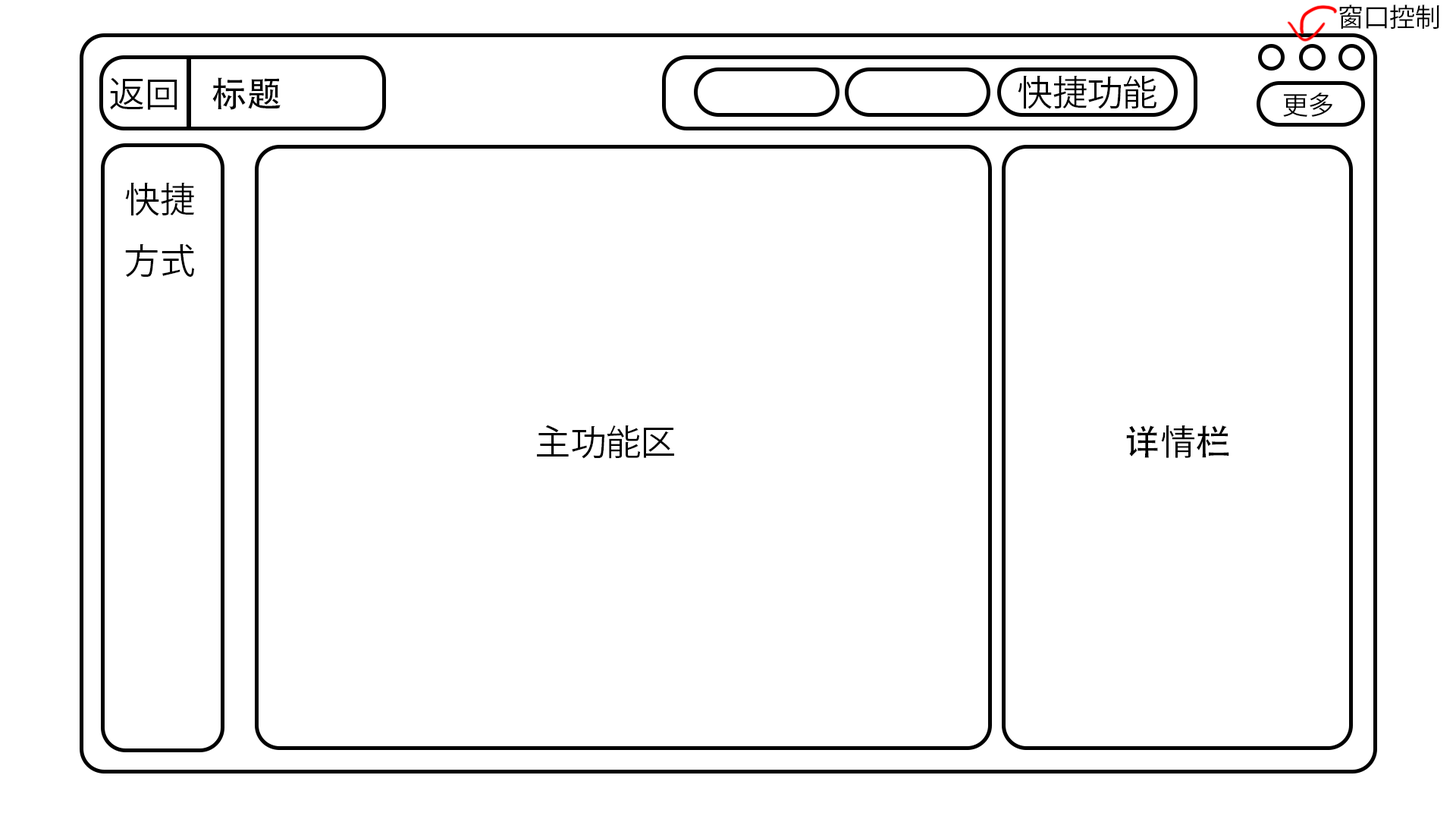
<style>
.page{position:relative;width:1456px;height:819px;background:#ffffff}
.page>*{position:absolute;margin:0}
.t1{font:25.7px "KozGoPr6N-Regular";color:#000000}
.t2{font:35.1px "KozGoPr6N-Regular";color:#000000}
.t3{font:35.1px "AdobeHeitiStd-Regular";color:#000000}
</style>
<div class="page">
<p class="t1" style="left:1339px;top:5px;width:100px;height:24px">窗口控制</p>
<p class="t2" style="left:110px;top:77px;width:67px;height:33px">返回</p>
<p class="t3" style="left:212px;top:77px;width:69px;height:33px">标题</p>
<p class="t2" style="left:1018px;top:75px;width:138px;height:34px">快捷功能</p>
<p class="t1" style="left:1283px;top:93px;width:50px;height:24px">更多</p>
<p class="t2" style="left:125px;top:182px;width:69px;height:96px">快捷<br>方式</p>
<p class="t2" style="left:537px;top:425px;width:137px;height:34px">主功能区</p>
<p class="t3" style="left:1126px;top:425px;width:103px;height:33px">详<span class="t2">情</span>栏</p>
</div>
